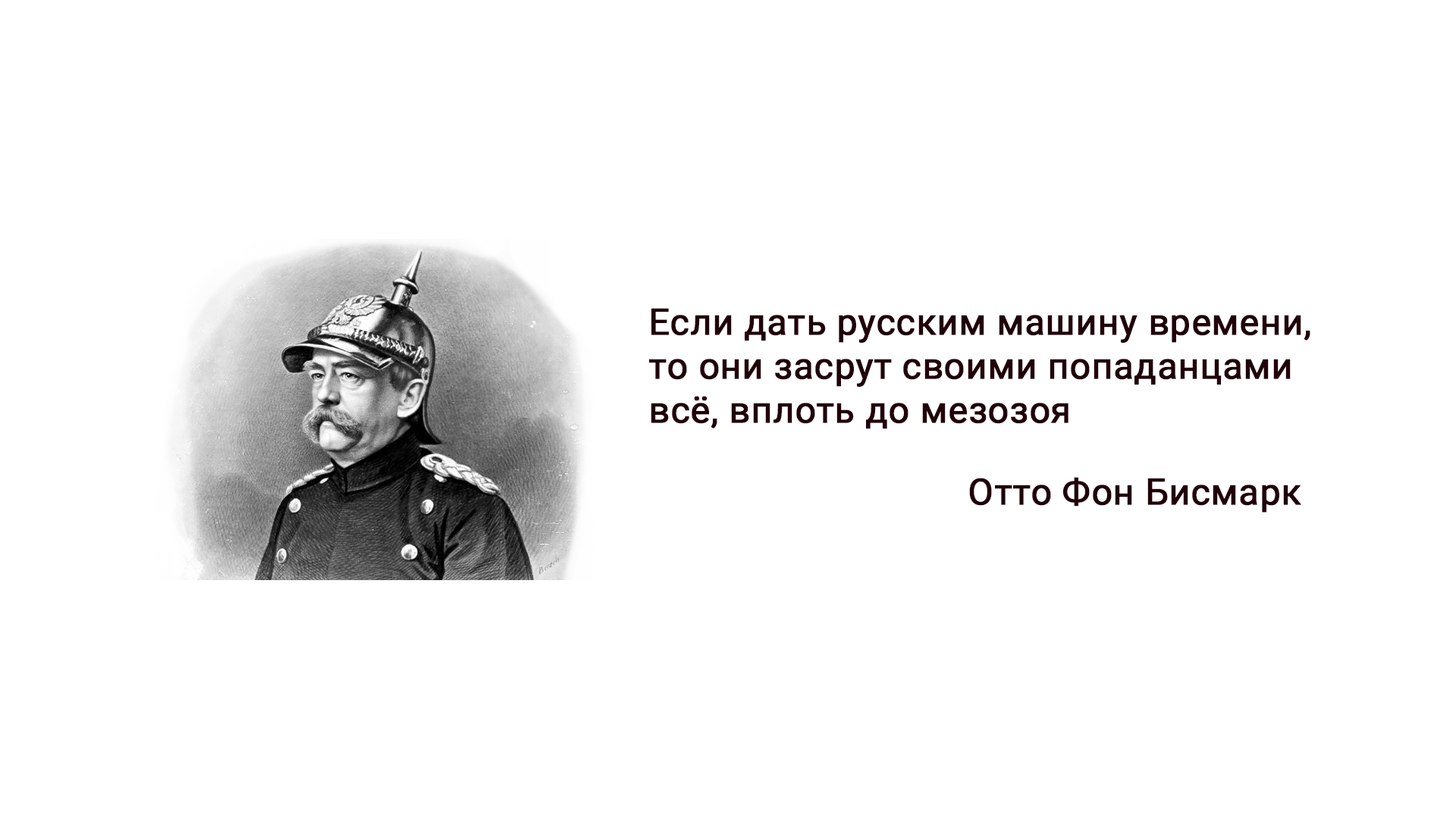
<style>
.page{position:relative;width:1456px;height:819px;background:#ffffff}
.page>*{position:absolute;margin:0}
.t1{font:36.4px "Roboto-Regular";color:#210008;font-weight:bold}
</style>
<div class="page">
<p class="t1" style="left:649px;top:308px;width:661px;height:121px">Если дать русским машину времени,<br>то они засрут своими попаданцами<br>всё, вплоть до мезозоя</p>
<p class="t1" style="left:969px;top:477px;width:332px;height:36px">Отто Фон Бисмарк</p>
</div>
